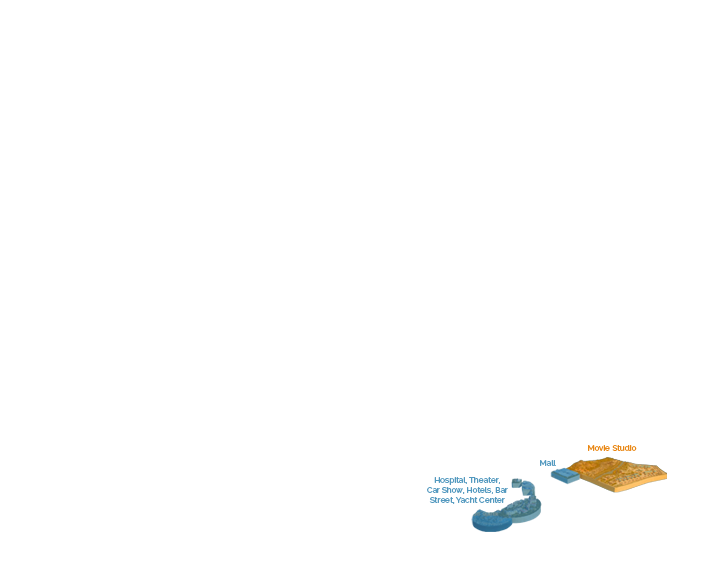
<style>
.page{position:relative;width:723px;height:575px;background:#ffffff}
.page>*{position:absolute;margin:0}
.t1{font:8.1px "Raleway-Medium";color:#e98714}
.t2{font:8.1px "Raleway-Medium";color:#5399bf}
</style>
<div class="page">
<p class="t1" style="left:588px;top:445px;width:49px;height:6px">Movie Studio</p>
<p class="t2" style="left:540px;top:460px;width:16px;height:6px">Mall</p>
<p class="t2" style="left:427px;top:477px;width:81px;height:27px;text-align:center">Hospital, Theater, <br>Car Show, Hotels, Bar Street, Yacht Center</p>
</div>
